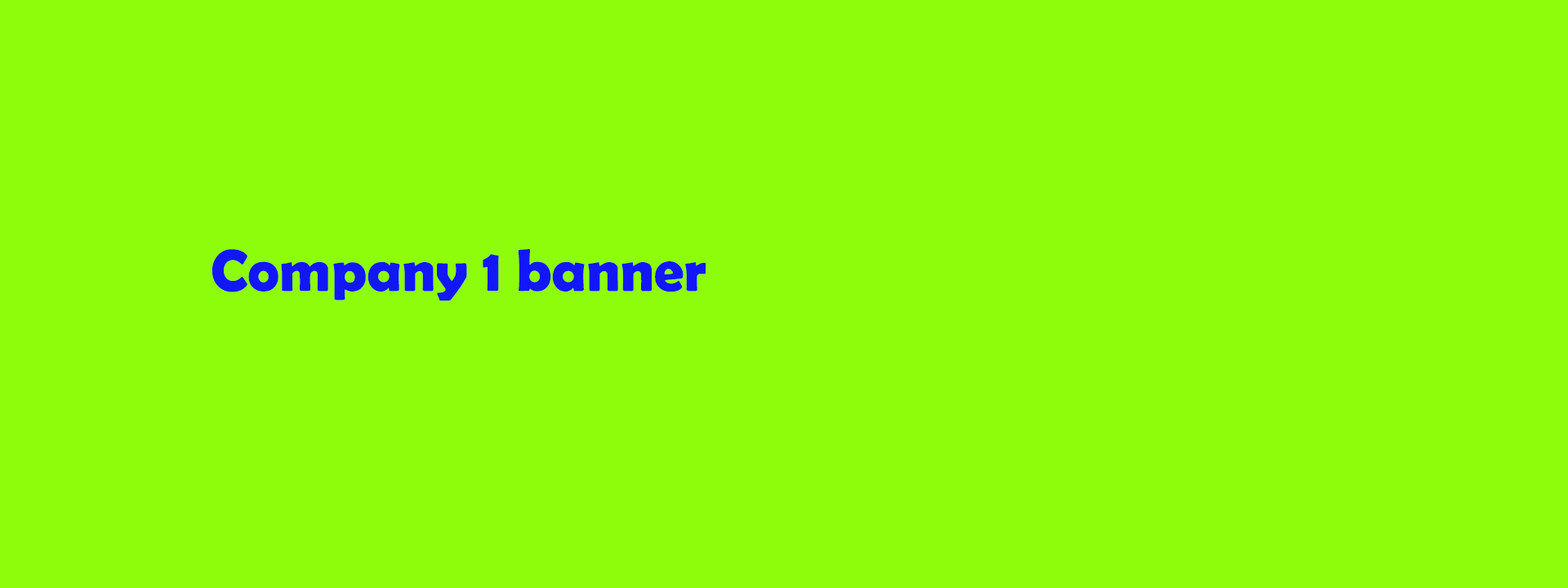
<style>
.page{position:relative;width:1568px;height:588px;background:#8efd0c}
.page>*{position:absolute;margin:0}
.t1{font:59.3px "BerlinSansFBDemi-Bold";color:#1217fa}
</style>
<div class="page">
<p class="t1" style="left:212px;top:249px;width:494px;height:52px">Company 1 banner</p>
</div>
